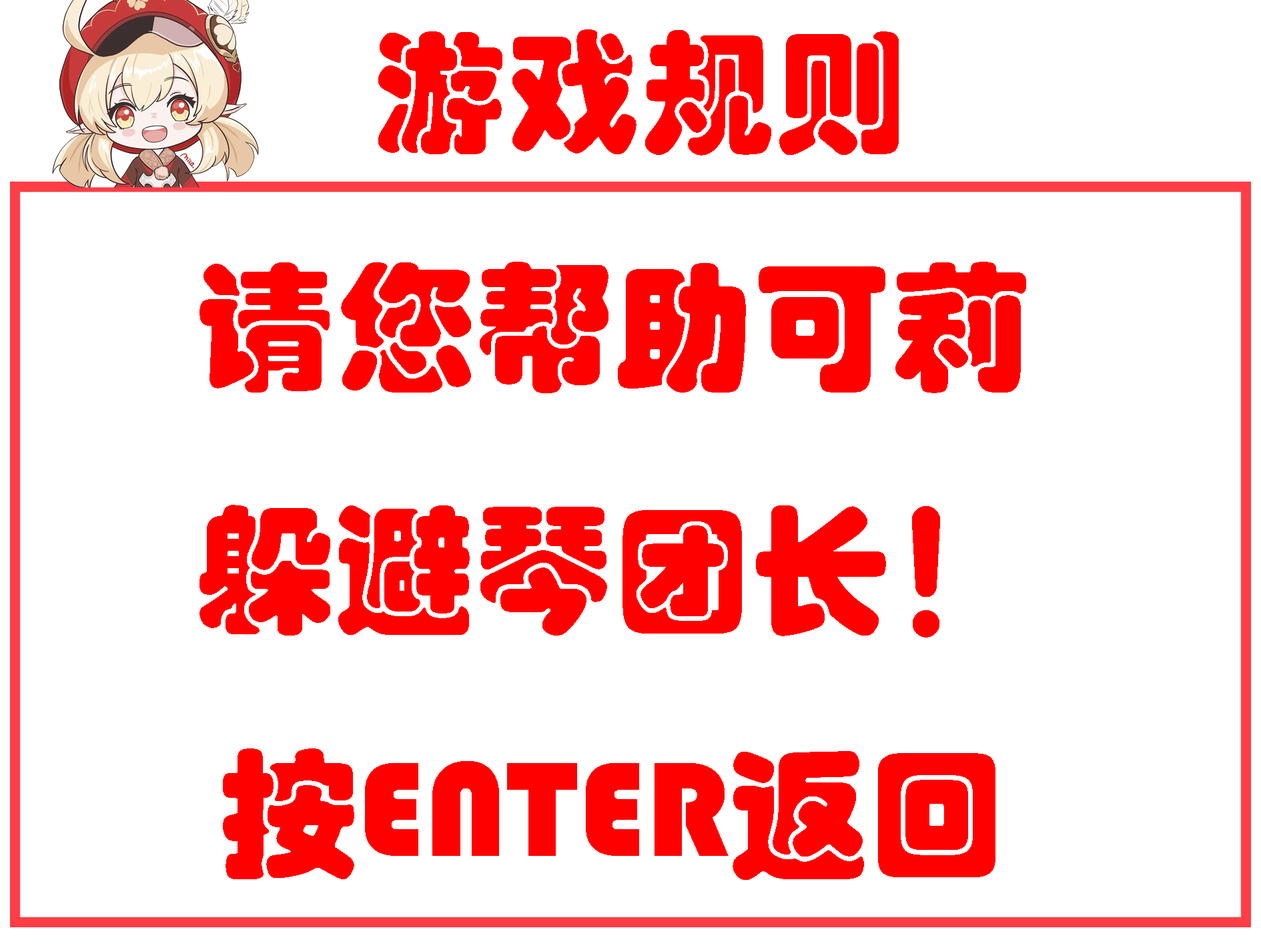
<style>
.page{position:relative;width:1261px;height:946px;background:#ffffff}
.page>*{position:absolute;margin:0}
.t1{font:133.5px "STHupo";color:#ff0000}
.t2{font:139px "STHupo";color:#ff0000}
</style>
<div class="page">
<p class="t1" style="left:378px;top:29px;width:521px;height:126px">游戏规则</p>
<p class="t2" style="left:200px;top:262px;width:826px;height:617px;text-align:center">请您帮助可莉<br>躲避琴团长！<br>按ENTER返回</p>
</div>
